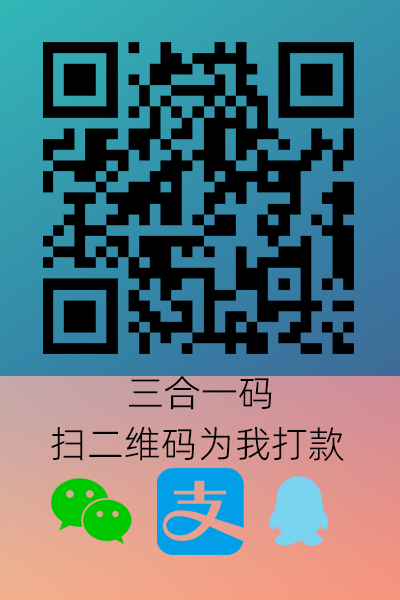
<style>
.page{position:relative;width:400px;height:600px}
.page>*{position:absolute;margin:0}
.t1{font:37.5px "AlibabaPuHuiTi_3_45_Light";color:#000000}
</style>
<div class="page">
<p class="t1" style="left:129px;top:376px;width:143px;height:34px">三合一码</p>
<p class="t1" style="left:51px;top:426px;width:293px;height:36px">扫二维码为我打款</p>
</div>
